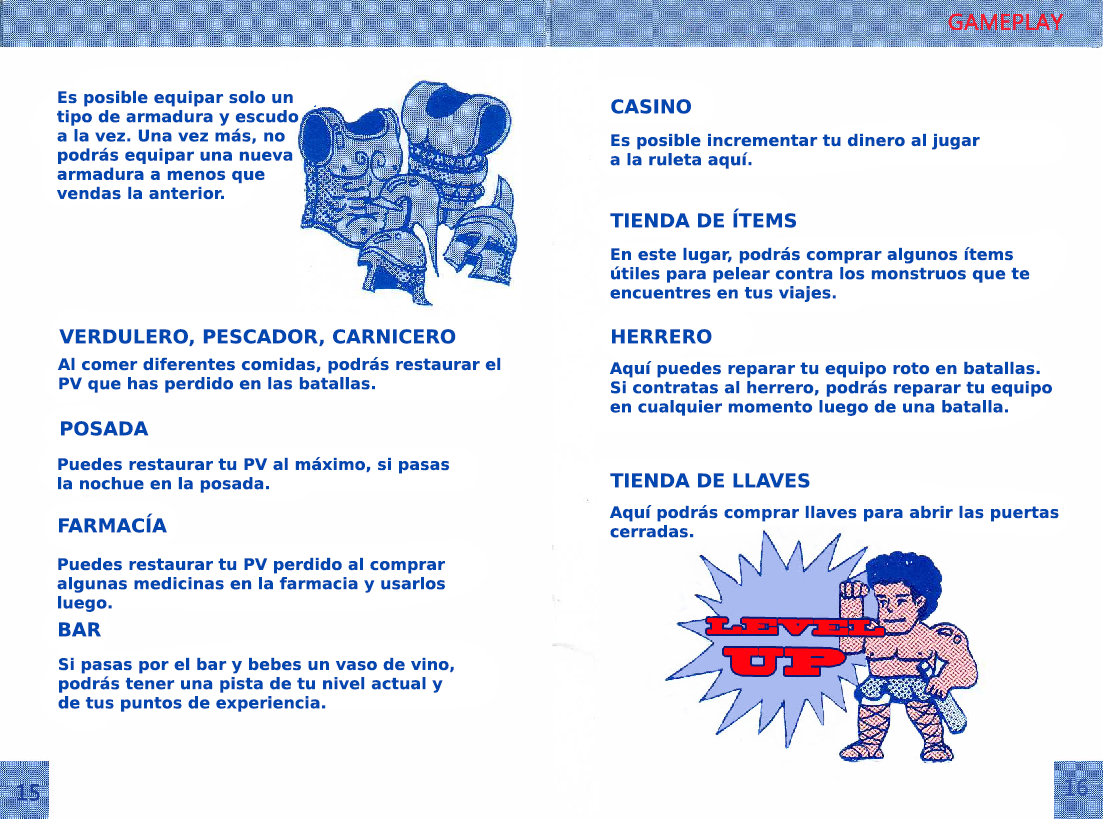
<style>
.page{position:relative;width:1103px;height:819px;background:#fefefe}
.page>*{position:absolute;margin:0}
.t1{font:16px "PrimaSansBT-Bold";color:#0247af}
.t2{font:19px "PrimaSansBT-Bold";color:#0247af}
</style>
<div class="page">
<p class="t1" style="left:57px;top:90px;width:242px;height:110px">Es posible equipar solo un <br>tipo de armadura y escudo<br>a la vez. Una vez más, no<br>podrás equipar una nueva<br>armadura a menos que<br>vendas la anterior.</p>
<p class="t2" style="left:611px;top:99px;width:80px;height:15px">CASINO</p>
<p class="t1" style="left:610px;top:133px;width:370px;height:36px">Es posible incrementar tu dinero al jugar<br>a la ruleta aquí.</p>
<p class="t2" style="left:610px;top:208px;width:186px;height:20px">TIENDA DE ÍTEMS</p>
<p class="t1" style="left:610px;top:247px;width:420px;height:55px">En este lugar, podrás comprar algunos ítems<br>útiles para pelear contra los monstruos que te<br>encuentres en tus viajes.</p>
<p class="t2" style="left:59px;top:329px;width:397px;height:18px">VERDULERO, PESCADOR, CARNICERO</p>
<p class="t2" style="left:612px;top:329px;width:100px;height:15px">HERRERO</p>
<p class="t1" style="left:57px;top:357px;width:444px;height:36px">Al comer diferentes comidas, podrás restaurar el PV que has perdido en las batallas.</p>
<p class="t1" style="left:609px;top:361px;width:443px;height:55px">Aquí puedes reparar tu equipo roto en batallas.<br>Si contratas al herrero, podrás reparar tu equipo<br>en cualquier momento luego de una batalla.</p>
<p class="t2" style="left:61px;top:421px;width:88px;height:15px">POSADA</p>
<p class="t1" style="left:58px;top:457px;width:392px;height:36px">Puedes restaurar tu PV al máximo, si pasas<br>la nochue en la posada.</p>
<p class="t2" style="left:610px;top:473px;width:200px;height:15px">TIENDA DE LLAVES</p>
<p class="t1" style="left:609px;top:505px;width:450px;height:33px">Aquí podrás comprar llaves para abrir las puertas cerradas.</p>
<p class="t2" style="left:59px;top:513px;width:108px;height:20px">FARMACÍA</p>
<p class="t1" style="left:57px;top:557px;width:388px;height:55px">Puedes restaurar tu PV perdido al comprar<br>algunas medicinas en la farmacia y usarlos<br>luego.</p>
<p class="t2" style="left:59px;top:622px;width:42px;height:15px">BAR</p>
<p class="t1" style="left:58px;top:657px;width:396px;height:55px">Si pasas por el bar y bebes un vaso de vino,<br>podrás tener una pista de tu nivel actual y<br>de tus puntos de experiencia.</p>
</div>
